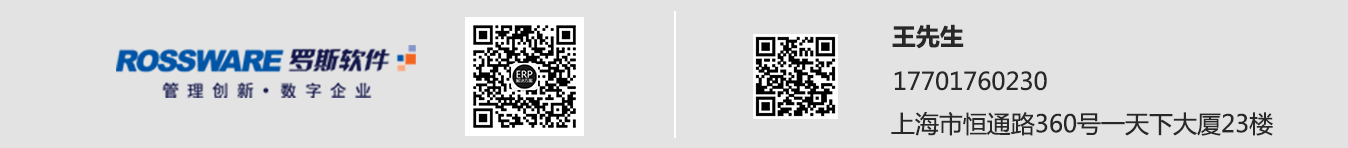
<style>
.page{position:relative;width:1348px;height:148px;background:#e3e3e3}
.page>*{position:absolute;margin:0}
.t1{font:24px "MicrosoftYaHei-Bold";color:#282828}
.t2{font:24px "MicrosoftYaHei";color:#282828}
</style>
<div class="page">
<p class="t1" style="left:892px;top:24px;width:72px;height:25px">王先生</p>
<p class="t2" style="left:894px;top:71px;width:153px;height:20px">17701760230</p>
<p class="t2" style="left:891px;top:112px;width:382px;height:24px">上海市恒通路360号一天下大厦23楼</p>
</div>
